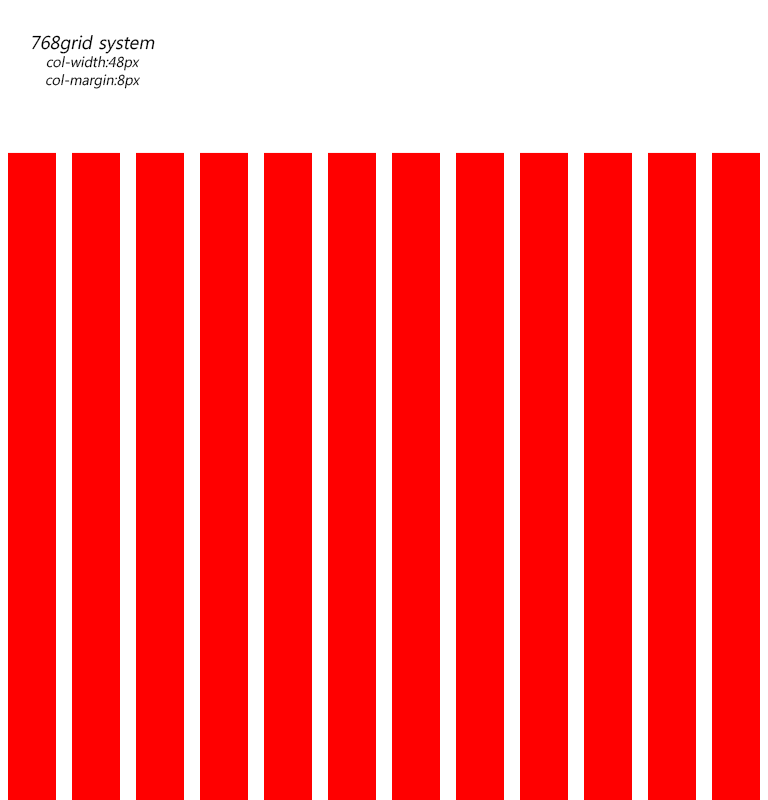
<style>
.page{position:relative;width:768px;height:800px;background:#ff0000}
.page>*{position:absolute;margin:0}
.t1{font:14px/18px "MalgunGothicRegular";color:#000000;font-style:italic}
.t2{font:18px/18px "MalgunGothicRegular";color:#000000;font-style:italic}
</style>
<div class="page">
<p class="t1" style="left:32px;top:35px;width:123px;height:54px;text-align:center"><span class="t2">768grid system<br></span>col-width:48px<br>col-margin:8px</p>
</div>
